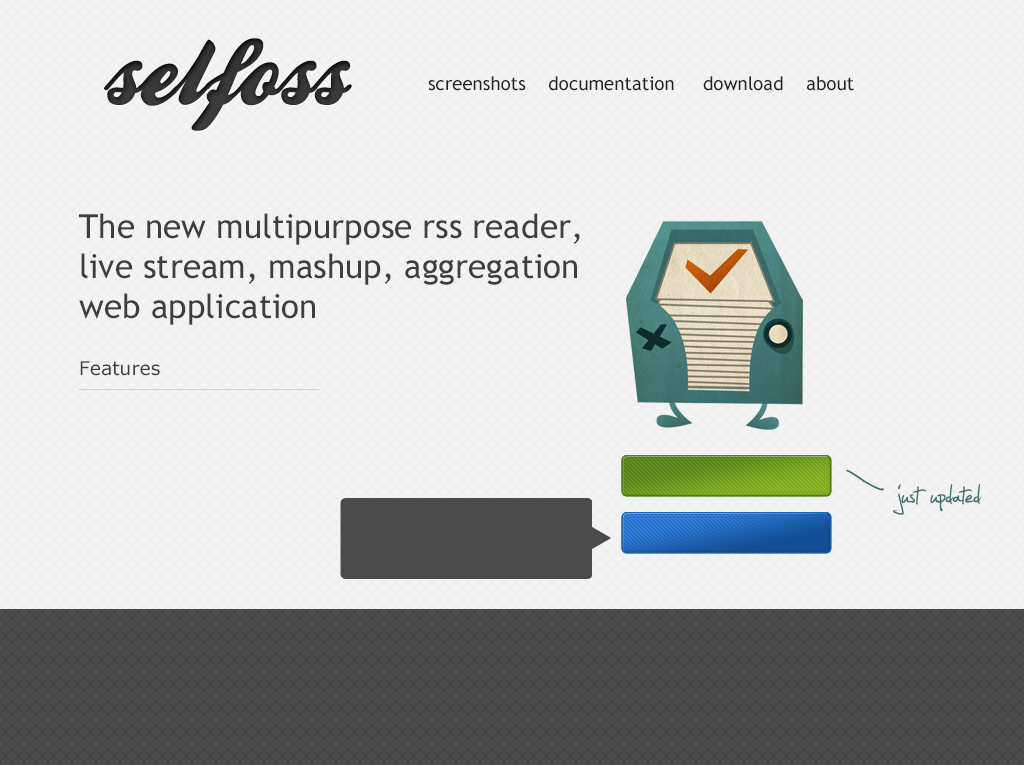
<style>
.page{position:relative;width:1024px;height:765px;background:#f3f3f3}
.page>*{position:absolute;margin:0}
.t1{font:100px "BallparkWeiner";color:#303030}
.t2{font:18.8px "TrebuchetMS";color:#222222}
.t3{font:33.3px "TrebuchetMS";color:#3e3e3e}
.t4{font:18.8px "Verdana";color:#3e3e3e}
.t5{font:72px "JellykaEstryasHandwriting";color:#3f716e}
.t6{font:60px "JellykaEstryasHandwriting";color:#3f716e}
</style>
<div class="page">
<p class="t1" style="left:104px;top:38px;width:248px;height:93px">selfoss</p>
<p class="t2" style="left:428px;top:76px;width:426px;height:15px">screenshots    documentation     download    about</p>
<p class="t3" style="left:79px;top:213px;width:501px;height:112px">The new multipurpose rss reader, <br>live stream, mashup, aggregation <br>web application</p>
<p class="t4" style="left:80px;top:361px;width:80px;height:15px">Features</p>
<p class="t5" style="left:846px;top:469px;width:38px;height:22px;rotate:-98deg">∕</p>
<p class="t6" style="left:892px;top:484px;width:90px;height:31px">just updated</p>
</div>
